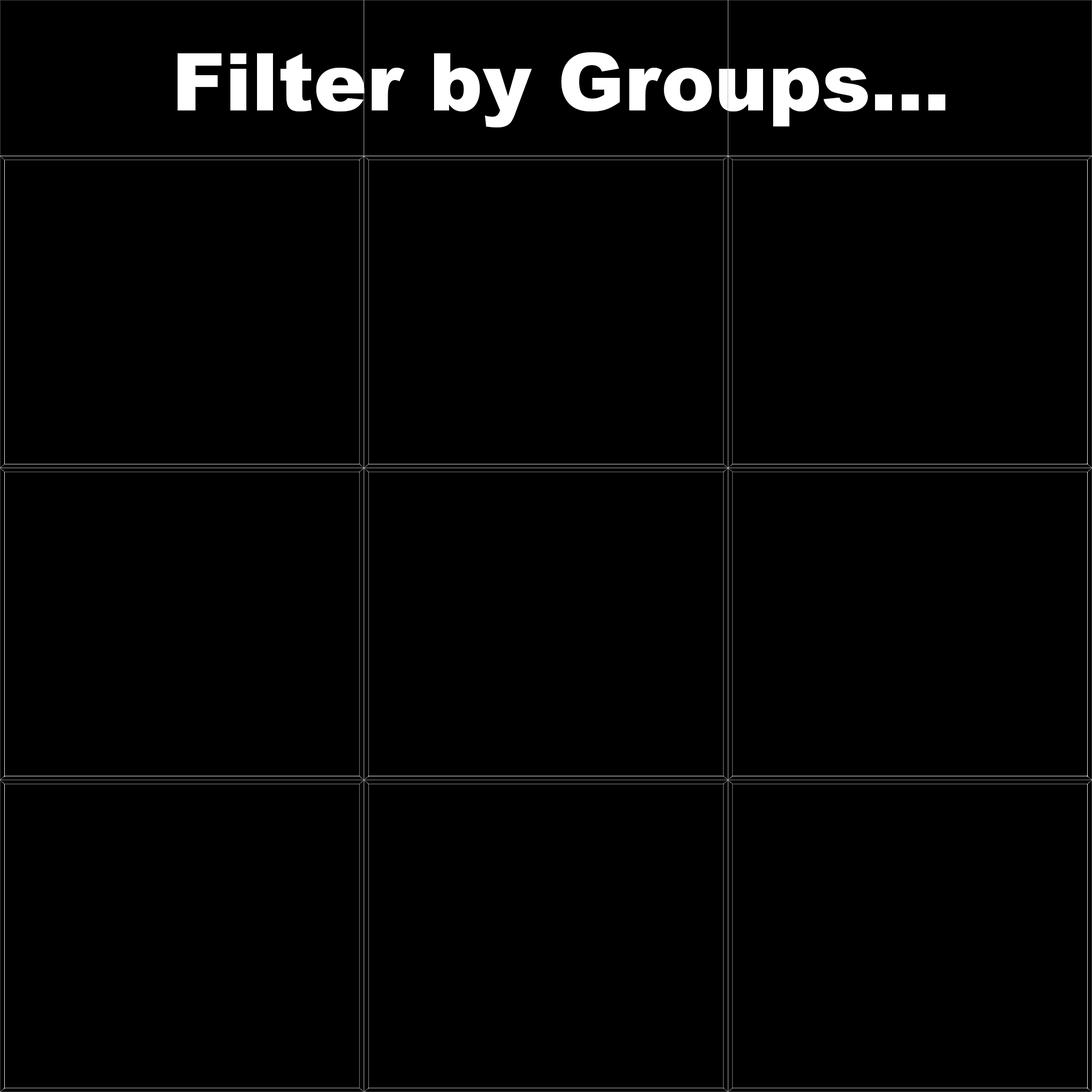
<style>
.page{position:relative;width:1092px;height:1092px;background:#000000}
.page>*{position:absolute;margin:0}
.t1{font:80px "Arial-Black";color:#ffffff}
</style>
<div class="page">
<p class="t1" style="left:178px;top:52px;width:767px;height:75px">Filter by Groups...</p>
</div>
